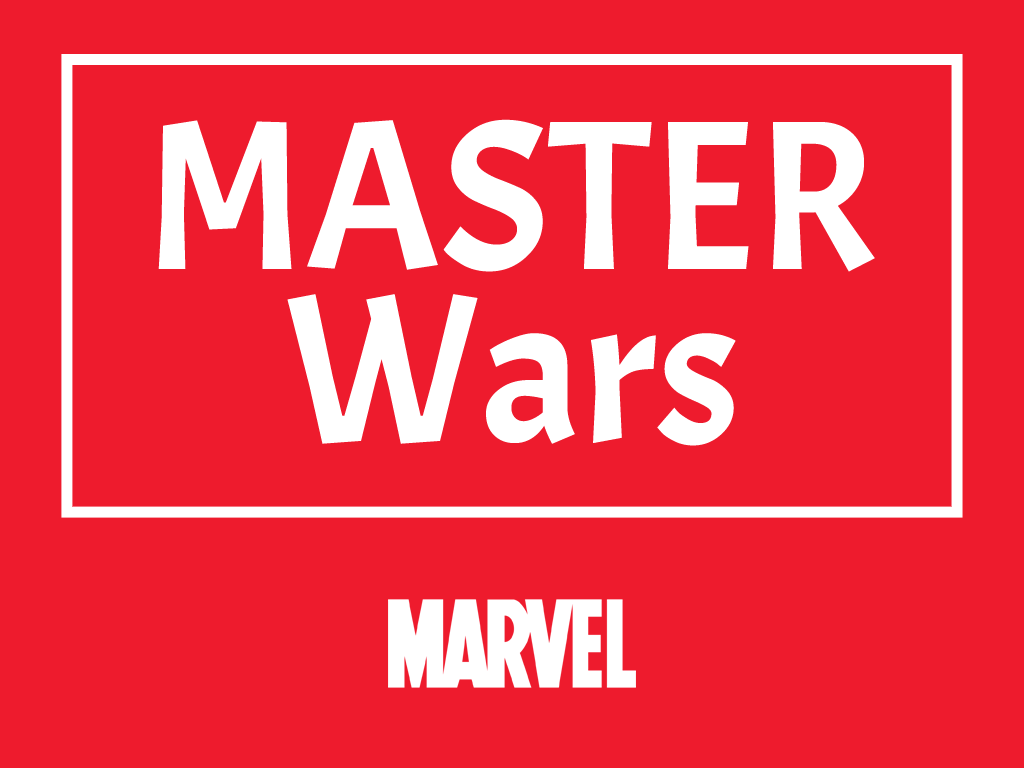
<style>
.page{position:relative;width:1024px;height:768px;background:#ee1b2d}
.page>*{position:absolute;margin:0}
.t1{font:213px/174px "Acme-Regular";color:#ffffff}
</style>
<div class="page">
<p class="t1" style="left:158px;top:119px;width:717px;height:327px;text-align:center">MASTER<br>Wars</p>
</div>
